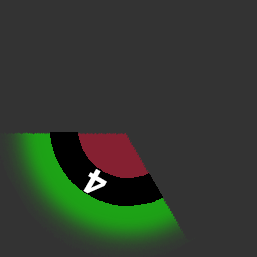
<style>
.page{position:relative;width:257px;height:257px;background:#333333}
.page>*{position:absolute;margin:0}
.t1{font:36.2px "HelveticaNeue-Bold";color:#ffffff}
</style>
<div class="page">
<p class="t1" style="left:83px;top:169px;width:24px;height:25px;rotate:-150deg">4</p>
</div>
